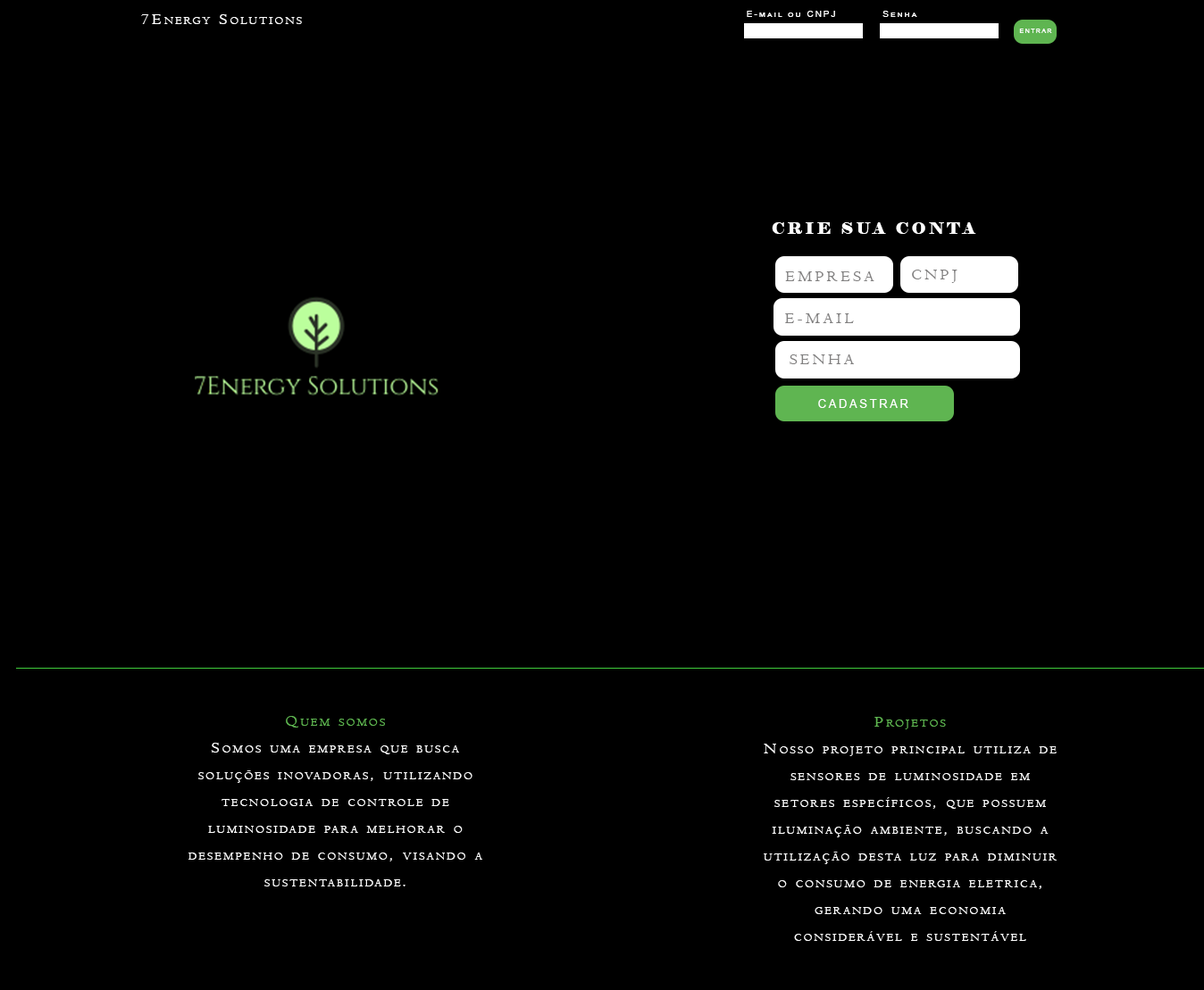
<style>
.page{position:relative;width:1204px;height:990px;background:#000000}
.page>*{position:absolute;margin:0}
.t1{font:16.1px "Centaur";letter-spacing:0.2em;color:#ffffff;font-variant:small-caps}
.t2{font:8.9px "ArialMT";letter-spacing:0.2em;color:#ffffff;font-variant:small-caps}
.t3{font:6.3px "ArialMT";letter-spacing:0.2em;color:#ffffff;text-transform:uppercase}
.t4{font:16.1px "Elephant-Regular";letter-spacing:0.2em;color:#ffffff;text-transform:uppercase}
.t5{font:16.1px "Centaur";letter-spacing:0.2em;color:#828181;text-transform:uppercase}
.t6{font:11.6px "ArialMT";letter-spacing:0.2em;color:#ffffff;text-transform:uppercase}
.t7{font:16.1px/26.8px "Centaur";letter-spacing:0.2em;color:#ffffff;font-variant:small-caps}
.t8{font:16.1px/26.8px "Centaur";letter-spacing:0.2em;color:#5fb551;font-variant:small-caps}
</style>
<div class="page">
<p class="t1" style="left:141px;top:14px;width:161px;height:10px">7Energy Solutions</p>
<p class="t2" style="left:747px;top:11px;width:88px;height:6px">E-mail ou CNPJ</p>
<p class="t2" style="left:882px;top:11px;width:35px;height:6px">Senha</p>
<p class="t3" style="left:1019px;top:29px;width:33px;height:4px">entrar</p>
<p class="t4" style="left:772px;top:222px;width:204px;height:12px">crie sua conta</p>
<p class="t5" style="left:912px;top:270px;width:45px;height:13px">CNPJ</p>
<p class="t5" style="left:785px;top:272px;width:89px;height:9px">eMpresa</p>
<p class="t5" style="left:785px;top:313px;width:69px;height:10px">e-mail</p>
<p class="t5" style="left:790px;top:355px;width:64px;height:9px">senha</p>
<p class="t6" style="left:818px;top:399px;width:90px;height:9px">Cadastrar</p>
<p class="t7" style="left:188px;top:716px;width:294px;height:171px;text-align:center"><span class="t8">Quem somos<br></span>Somos uma empresa que busca soluções inovadoras, utilizando tecnologia de controle de luminosidade para melhorar o desempenho de consumo, visando a sustentabilidade.</p>
<p class="t7" style="left:764px;top:717px;width:293px;height:224px;text-align:center"><span class="t8">Projetos<br></span>Nosso projeto principal utiliza de sensores de luminosidade em setores específicos, que possuem iluminação ambiente, buscando a utilização desta luz para diminuir o consumo de energia eletrica, gerando uma economia considerável e sustentável</p>
</div>
